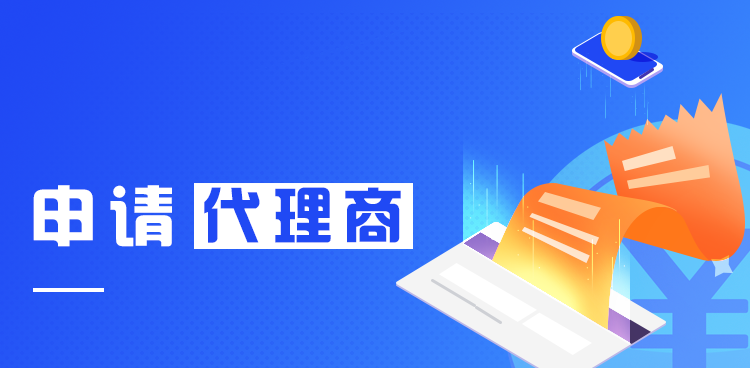
<style>
.page{position:relative;width:750px;height:368px}
.page>*{position:absolute;margin:0}
.t1{font:65.1px "FZHZGBJW--GB1-0";letter-spacing:0.2em;color:#ffffff}
.t2{font:58.7px "FZHZGBJW--GB1-0";letter-spacing:0.2em;color:#2049f4}
</style>
<div class="page">
<p class="t1" style="left:33px;top:185px;width:139px;height:62px">申请</p>
<p class="t2" style="left:204px;top:187px;width:197px;height:56px">代理商</p>
</div>
